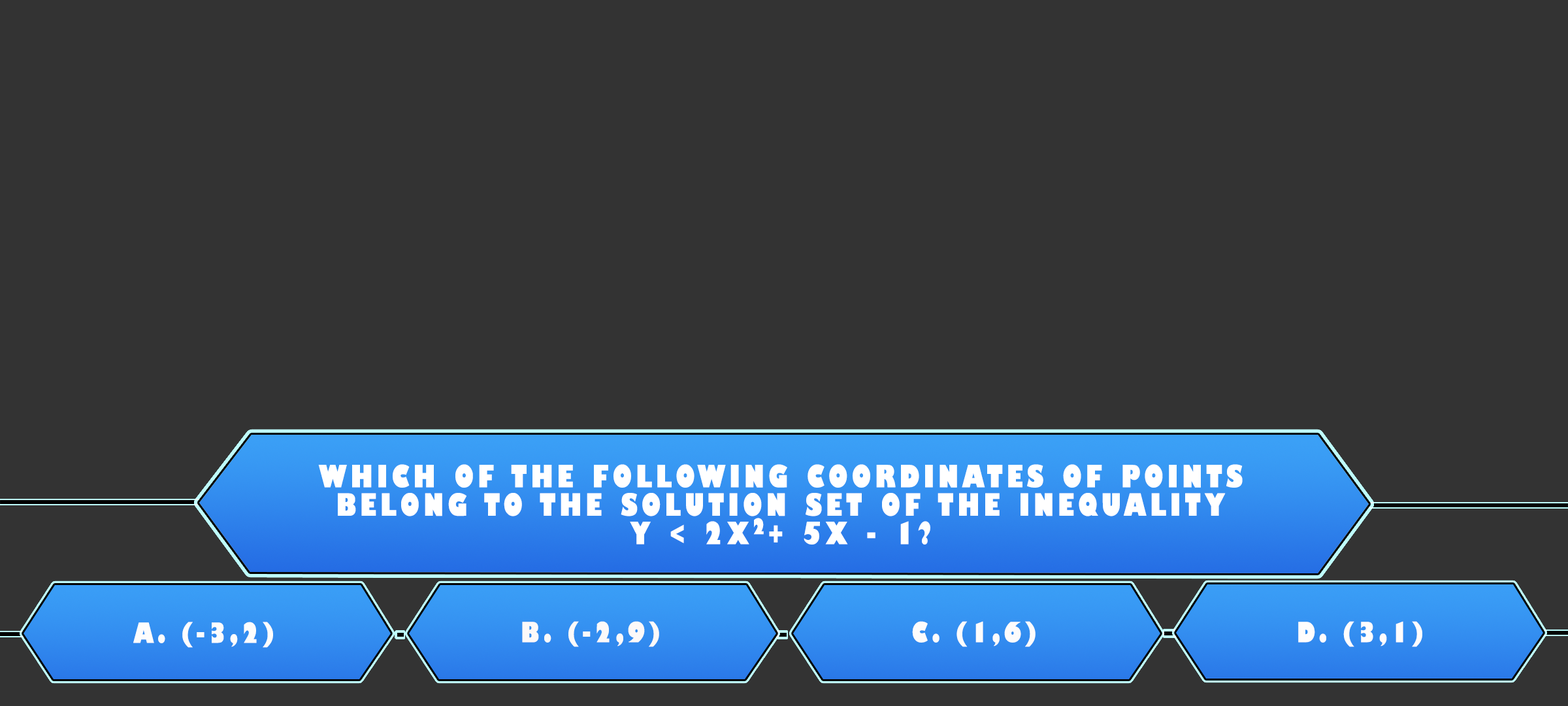
<style>
.page{position:relative;width:1568px;height:706px;background:#333333}
.page>*{position:absolute;margin:0}
.t1{font:30px/28.4px "GillSans-UltraBoldCondensed";letter-spacing:0.115em;color:#ffffff;text-transform:uppercase;scale:1.12 1}
.t2{font:21.1px "GillSans-UltraBoldCondensed";letter-spacing:0.115em;color:#ffffff;text-transform:uppercase;scale:1.11 1}
.t3{font:27.2px "GillSans-UltraBoldCondensed";letter-spacing:0.115em;color:#fdfdfd;text-transform:uppercase;scale:1.12 1}
.t4{font:27.2px "GillSans-UltraBoldCondensed";letter-spacing:0.115em;color:#fcf9f9;text-transform:uppercase;scale:1.12 1}
.t5{font:27.2px "GillSans-UltraBoldCondensed";letter-spacing:0.115em;color:#fdfcfc;text-transform:uppercase;scale:1.12 1}
.t6{font:27.2px "GillSans-UltraBoldCondensed";letter-spacing:0.115em;color:#fffdfd;text-transform:uppercase;scale:1.12 1}
</style>
<div class="page">
<p class="t1" style="left:318px;top:464px;width:925px;height:80px;text-align:center">Which of the following coordinates of points<br>belong to the solution set of the inequality<br>y &lt; 2x + 5x - 1?</p>
<p class="t2" style="left:753px;top:517px;width:11px;height:17px">2</p>
<p class="t3" style="left:133px;top:621px;width:140px;height:26px">A. (-3,2)</p>
<p class="t4" style="left:522px;top:621px;width:137px;height:26px">B. (-2,9)</p>
<p class="t5" style="left:912px;top:621px;width:124px;height:26px">C. (1,6)</p>
<p class="t6" style="left:1298px;top:621px;width:124px;height:26px">D. (3,1)</p>
</div>
